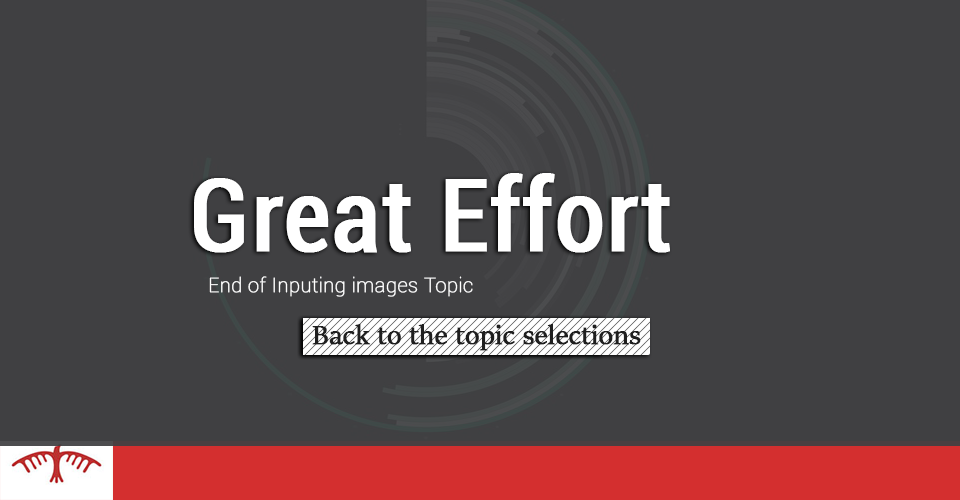
<style>
.page{position:relative;width:960px;height:500px;background:#404042}
.page>*{position:absolute;margin:0}
.t1{font:100px "Roboto-Condensed";color:#ffffff;font-weight:bold}
.t2{font:20px "Roboto-Thin";color:#ffffff;font-weight:bold}
.t3{font:30px "SitkaBanner";color:#1f1f1f;font-weight:bold}
</style>
<div class="page">
<p class="t1" style="left:194px;top:173px;width:476px;height:80px">Great Effort</p>
<p class="t2" style="left:209px;top:276px;width:264px;height:21px">End of Inputing images Topic</p>
<p class="t3" style="left:312px;top:324px;width:329px;height:27px">Back to the topic selections</p>
</div>
